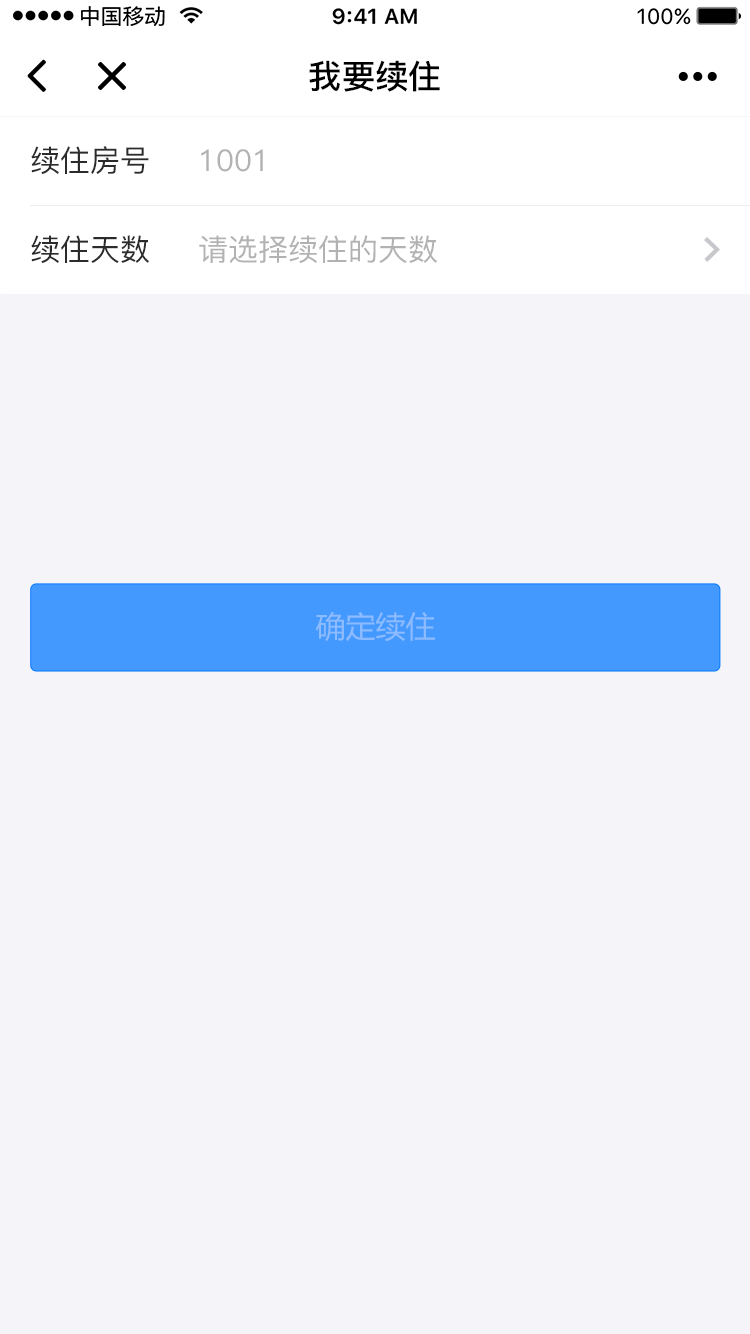
<style>
.page{position:relative;width:750px;height:1334px;background:#f5f5f9}
.page>*{position:absolute;margin:0}
.t1{font:33.2px "PingFang-SC-Bold";color:#000000}
.t2{font:30px "PingFang-SC-Medium";color:#2b2b2b}
.t3{font:30px "PingFang-SC-Medium";color:#b2b2b2}
.t4{font:30px "MicrosoftYaHei";color:#8dbbff}
</style>
<div class="page">
<p class="t1" style="left:309px;top:60px;width:131px;height:32px">我要续住</p>
<p class="t2" style="left:31px;top:146px;width:118px;height:28px">续住房号</p>
<p class="t3" style="left:201px;top:149px;width:62px;height:23px">1001</p>
<p class="t2" style="left:31px;top:235px;width:118px;height:28px">续住天数</p>
<p class="t3" style="left:199px;top:235px;width:238px;height:28px">请选择续住的天数</p>
<p class="t4" style="left:315px;top:612px;width:120px;height:30px">确定续住</p>
</div>
